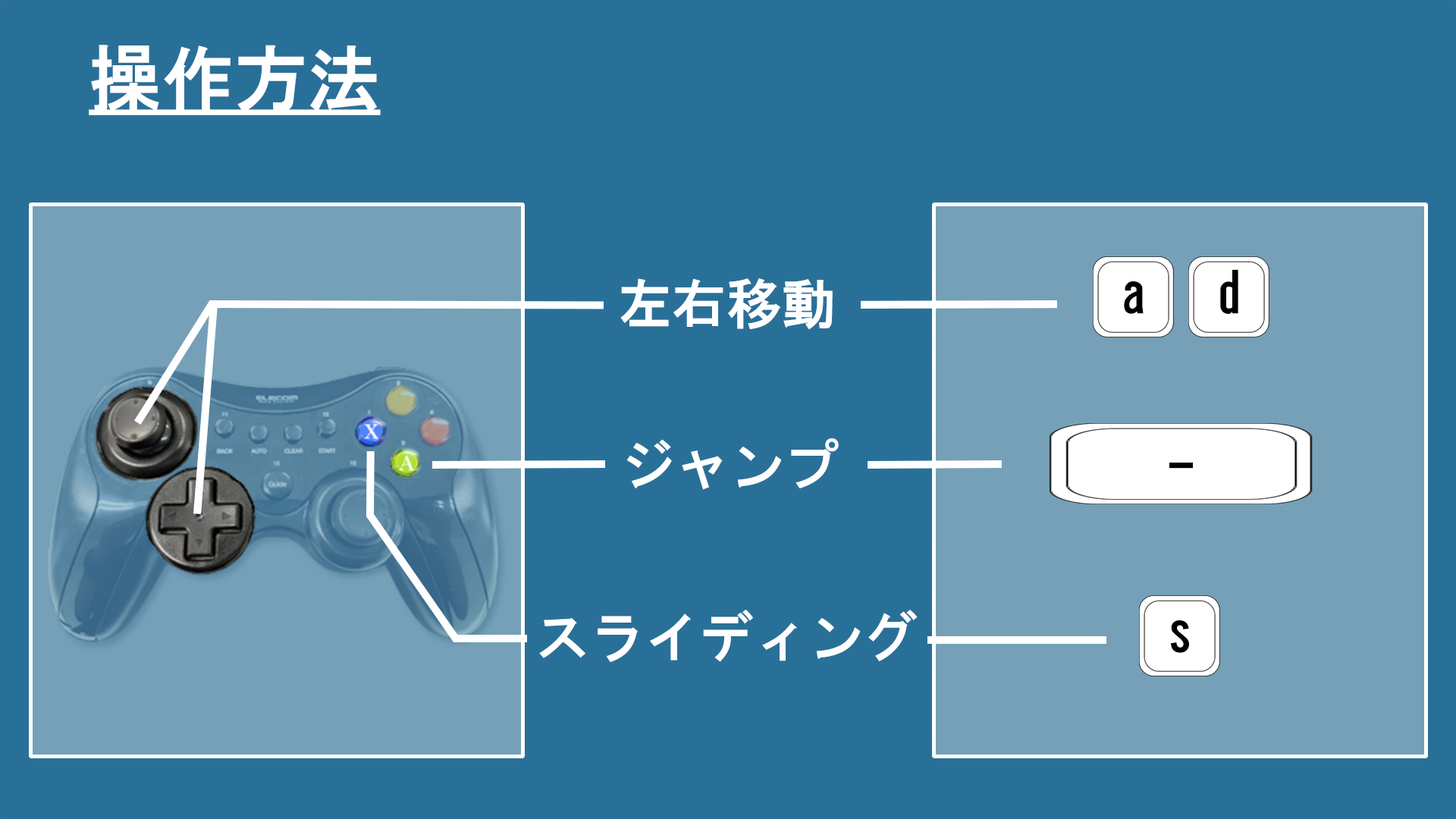
<style>
.page{position:relative;width:1456px;height:819px;background:#297099}
.page>*{position:absolute;margin:0}
.t1{font:72.8px "HGGothicE";color:#ffffff;text-decoration:underline}
.t2{font:54.6px "HGGothicE";color:#000000}
.t3{font:54.6px "HGGothicE";color:#ffffff}
</style>
<div class="page">
<p class="t1" style="left:89px;top:45px;width:292px;height:70px">操作方法</p>
<p class="t2" style="left:1220px;top:269px;width:18px;height:45px">d</p>
<p class="t3" style="left:620px;top:278px;width:213px;height:52px">左右移動</p>
<p class="t2" style="left:1124px;top:281px;width:20px;height:33px">a</p>
<p class="t3" style="left:626px;top:438px;width:213px;height:52px">ジャンプ</p>
<p class="t2" style="left:1169px;top:463px;width:24px;height:6px">-</p>
<p class="t3" style="left:539px;top:610px;width:379px;height:52px">スライディング</p>
<p class="t2" style="left:1171px;top:620px;width:18px;height:33px">s</p>
</div>
